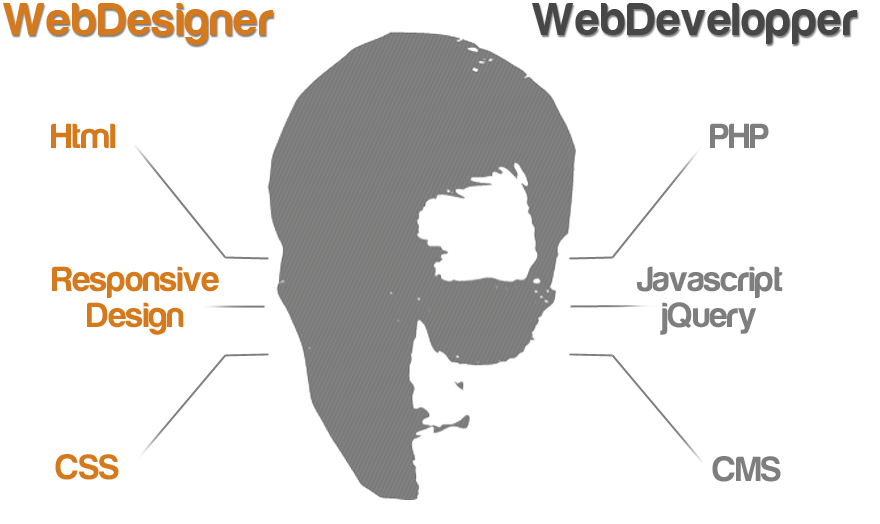
<style>
.page{position:relative;width:880px;height:524px;background:#ffffff}
.page>*{position:absolute;margin:0}
.t1{font:36px "Harabara";color:#d57a1c}
.t2{font:36px "Harabara";color:#7e7e7e}
.t3{font:36px/36px "Harabara";color:#d57a1c}
.t4{font:36px/36px "Harabara";color:#7e7e7e}
</style>
<div class="page">
<p class="t1" style="left:51px;top:123px;width:65px;height:25px">Html</p>
<p class="t2" style="left:710px;top:123px;width:59px;height:25px">PHP</p>
<p class="t3" style="left:52px;top:266px;width:167px;height:69px;text-align:center">Responsive <br>Design</p>
<p class="t4" style="left:637px;top:266px;width:146px;height:69px;text-align:center">Javascript<br>jQuery</p>
<p class="t1" style="left:55px;top:454px;width:64px;height:26px">CSS</p>
<p class="t2" style="left:712px;top:456px;width:69px;height:26px">CMS</p>
</div>
